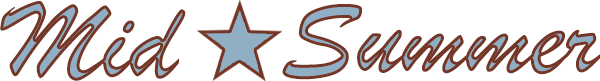
<style>
.page{position:relative;width:600px;height:81px;background:#ffffff}
.page>*{position:absolute;margin:0}
.t1{font:116.7px "BrushScriptMT"}
</style>
<div class="page">
<p class="t1" style="left:0px;top:1px;width:186px;height:80px">Mid</p>
<p class="t1" style="left:282px;top:4px;width:318px;height:76px">Summer</p>
</div>
